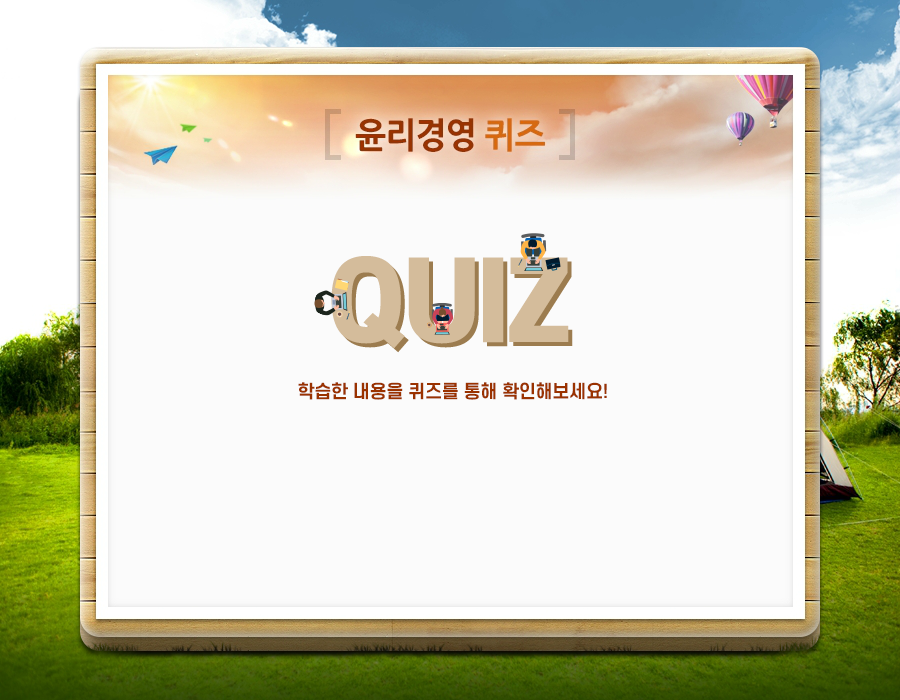
<style>
.page{position:relative;width:900px;height:700px;background:#fbfbfb}
.page>*{position:absolute;margin:0}
.t1{font:105.9px "S-CoreDream-8Heavy";letter-spacing:-0.025em;color:#d4bc9b}
.t2{font:18px "S-CoreDream-6Bold";letter-spacing:-0.025em;color:#9a3200}
</style>
<div class="page">
<p class="t1" style="left:331px;top:256px;width:238px;height:93px">QUIZ</p>
<p class="t2" style="left:298px;top:382px;width:309px;height:18px">학습한 내용을 퀴즈를 통해 확인해보세요!</p>
</div>
